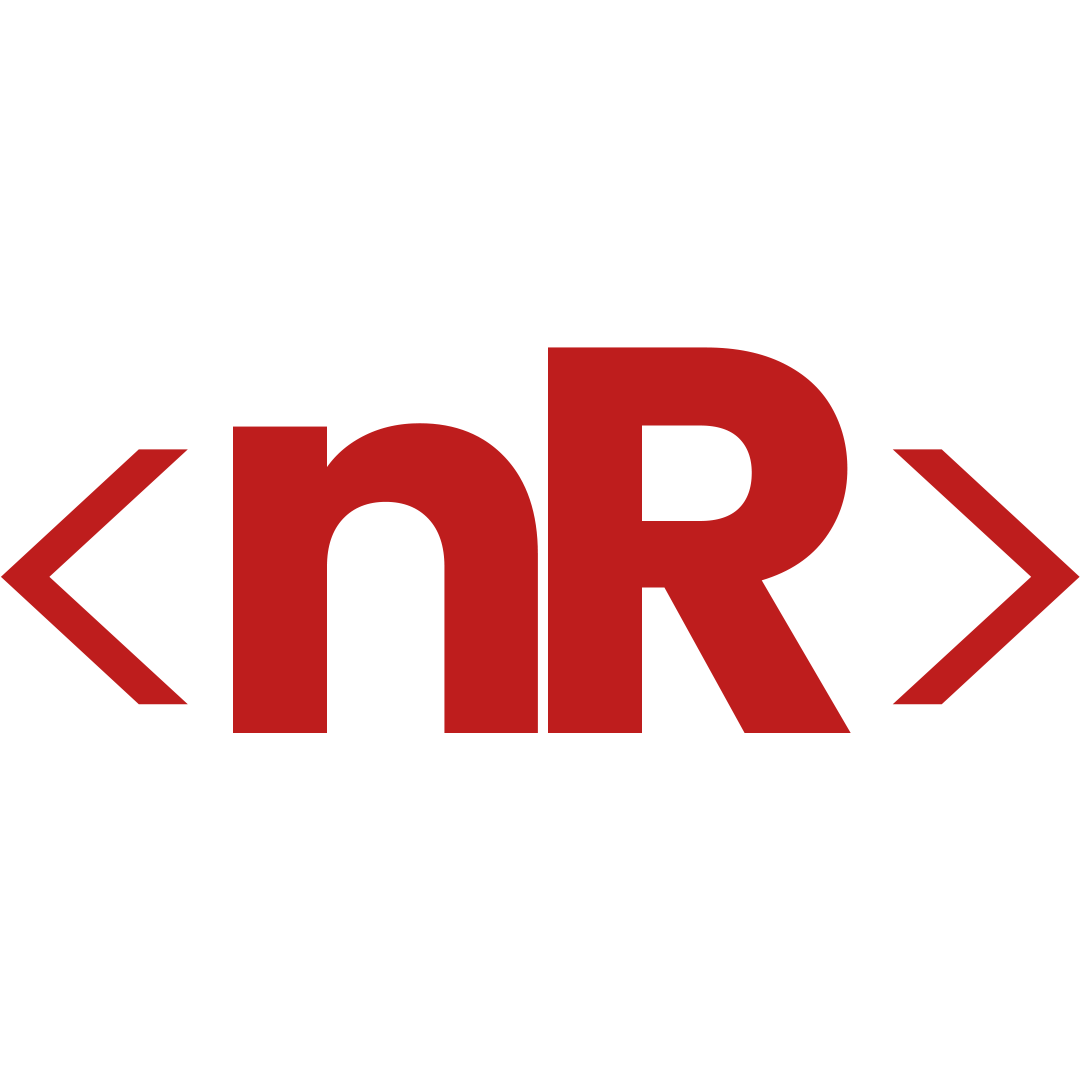
<style>
.page{position:relative;width:1080px;height:1080px;background:#ffffff}
.page>*{position:absolute;margin:0}
.t1{font:549.2px "Poppins-Bold";letter-spacing:-0.1em;color:#be1d1d}
.t2{font:549.2px "Poppins-Light";letter-spacing:-0.1em;color:#be1d1d}
</style>
<div class="page">
<p class="t1" style="left:233px;top:347px;width:618px;height:386px">nR</p>
<p class="t2" style="left:0px;top:449px;width:188px;height:256px">&lt;</p>
<p class="t2" style="left:892px;top:449px;width:188px;height:256px">&gt;</p>
</div>
